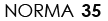
<style>
.page{position:relative;width:108px;height:21px;background:#ffffff}
.page>*{position:absolute;margin:0}
.t1{font:18px "CenturyGothic";color:#070707}
.t2{font:18px "CenturyGothic-Bold";color:#080808}
</style>
<div class="page">
<p class="t1" style="left:5px;top:4px;width:69px;height:13px">NORMA</p>
<p class="t2" style="left:81px;top:4px;width:20px;height:13px">35</p>
</div>
